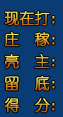
<style>
.page{position:relative;width:63px;height:117px;background:#093c75}
.page>*{position:absolute;margin:0}
.t1{font:15px "YouYuan";letter-spacing:-0.025em;font-weight:bold}
</style>
<div class="page">
<p class="t1" style="left:4px;top:11px;width:51px;height:15px">现在打:</p>
<p class="t1" style="left:4px;top:32px;width:51px;height:15px">庄  稼:</p>
<p class="t1" style="left:5px;top:53px;width:50px;height:16px">亮  主:</p>
<p class="t1" style="left:5px;top:75px;width:50px;height:16px">留  底:</p>
<p class="t1" style="left:4px;top:97px;width:51px;height:16px">得  分:</p>
</div>
